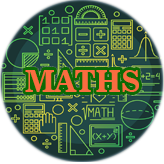
<style>
.page{position:relative;width:164px;height:164px}
.page>*{position:absolute;margin:0}
.t1{font:30px "News706BT-BoldC";color:#fa6c40}
</style>
<div class="page">
<p class="t1" style="left:25px;top:70px;width:114px;height:22px">MATHS</p>
</div>
